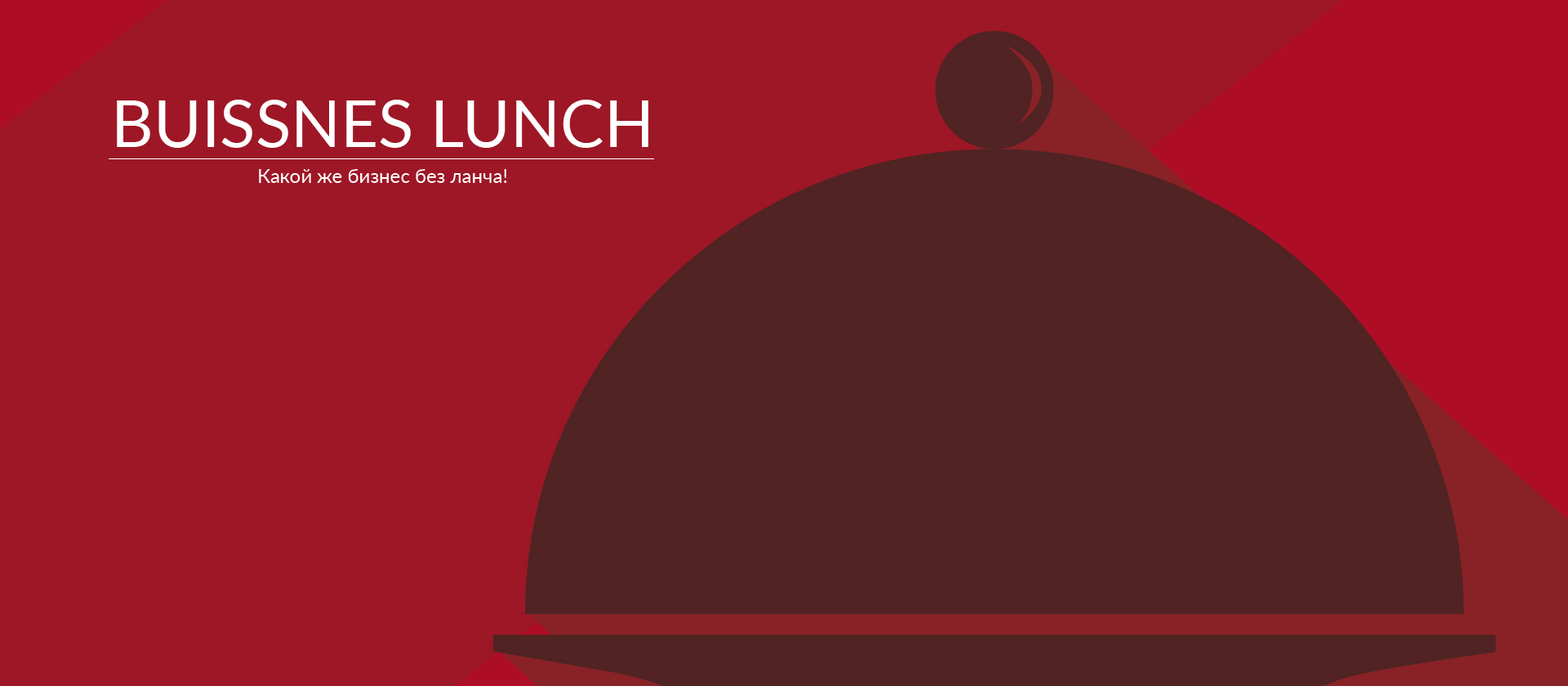
<style>
.page{position:relative;width:1568px;height:686px;background:#9e1726}
.page>*{position:absolute;margin:0}
.t1{font:65.3px "Lato-Regular";color:#ffffff}
.t2{font:19.6px "Lato-Regular";color:#ffffff}
</style>
<div class="page">
<p class="t1" style="left:117px;top:100px;width:531px;height:48px">BUISSNES LUNCH</p>
<p class="t2" style="left:259px;top:169px;width:248px;height:14px">Какой же бизнес без ланча!</p>
</div>
